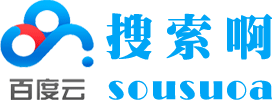
<style>
.page{position:relative;width:280px;height:100px;background:#ffffff}
.page>*{position:absolute;margin:0}
.t1{font:48px "¾­µäÌØËÎ¼ò Regular";letter-spacing:0.25em;color:#00a5f6}
.t2{font:30px "BroadwayNormal";letter-spacing:0.07em;color:#00a5f6}
</style>
<div class="page">
<p class="t1" style="left:106px;top:13px;width:166px;height:47px">搜索啊</p>
<p class="t2" style="left:108px;top:80px;width:164px;height:20px">sousuoa</p>
</div>
